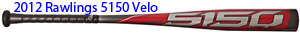
<style>
.page{position:relative;width:300px;height:33px;background:#ffffff}
.page>*{position:absolute;margin:0}
.t1{font:14px "MyriadPro-Regular";color:#0000ff}
</style>
<div class="page">
<p class="t1" style="left:14px;top:2px;width:144px;height:13px">2012 Rawlings 5150 Velo</p>
</div>
